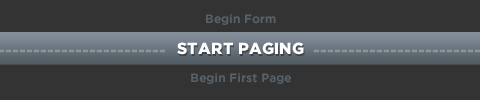
<style>
.page{position:relative;width:480px;height:100px;background:#333333}
.page>*{position:absolute;margin:0}
.t1{font:12px "GothamBold";color:#576169}
.t2{font:16px "GothamBlack";color:#8c949a;text-transform:uppercase}
.t3{font:16px "GothamBlack";color:#ffffff;text-transform:uppercase}
</style>
<div class="page">
<p class="t1" style="left:206px;top:14px;width:70px;height:11px">Begin Form</p>
<p class="t2" style="left:0px;top:49px;width:165px;height:4px">------------------------</p>
<p class="t3" style="left:177px;top:42px;width:127px;height:13px">start Paging</p>
<p class="t2" style="left:313px;top:49px;width:167px;height:4px">------------------------</p>
<p class="t1" style="left:191px;top:73px;width:100px;height:11px">Begin First Page</p>
</div>
